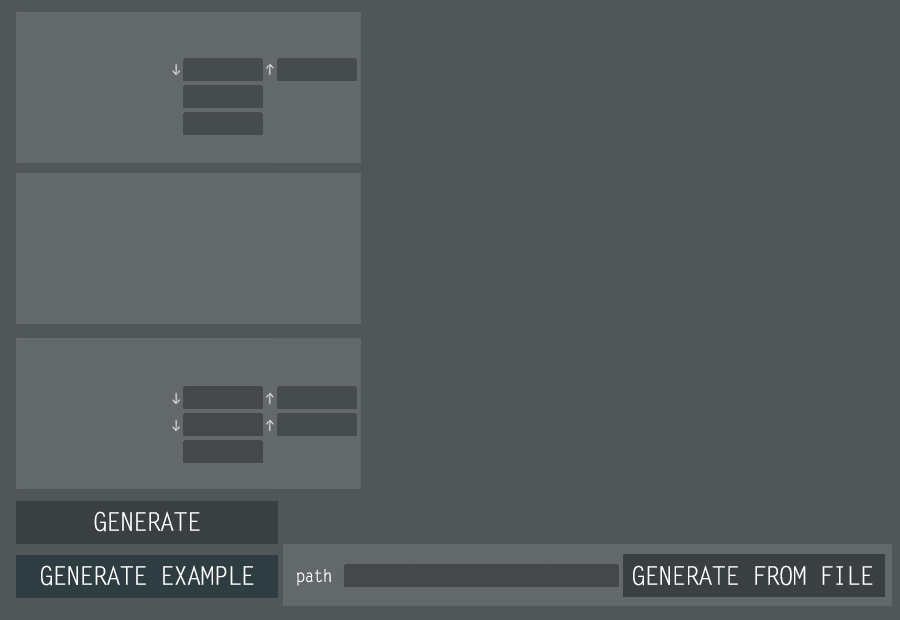
<style>
.page{position:relative;width:900px;height:620px;background:#515658}
.page>*{position:absolute;margin:0}
.t1{font:25.6px "LetterGothicStd";letter-spacing:-0.075em;color:#ffffff}
.t2{font:17.1px "LetterGothicStd";letter-spacing:-0.075em;color:#ffffff}
</style>
<div class="page">
<p class="t1" style="left:94px;top:511px;width:106px;height:21px">GENERATE</p>
<p class="t1" style="left:41px;top:565px;width:213px;height:21px">GENERATE EXAMPLE</p>
<p class="t2" style="left:297px;top:569px;width:34px;height:17px">path</p>
<p class="t1" style="left:633px;top:565px;width:240px;height:21px">GENERATE FROM FILE</p>
</div>
